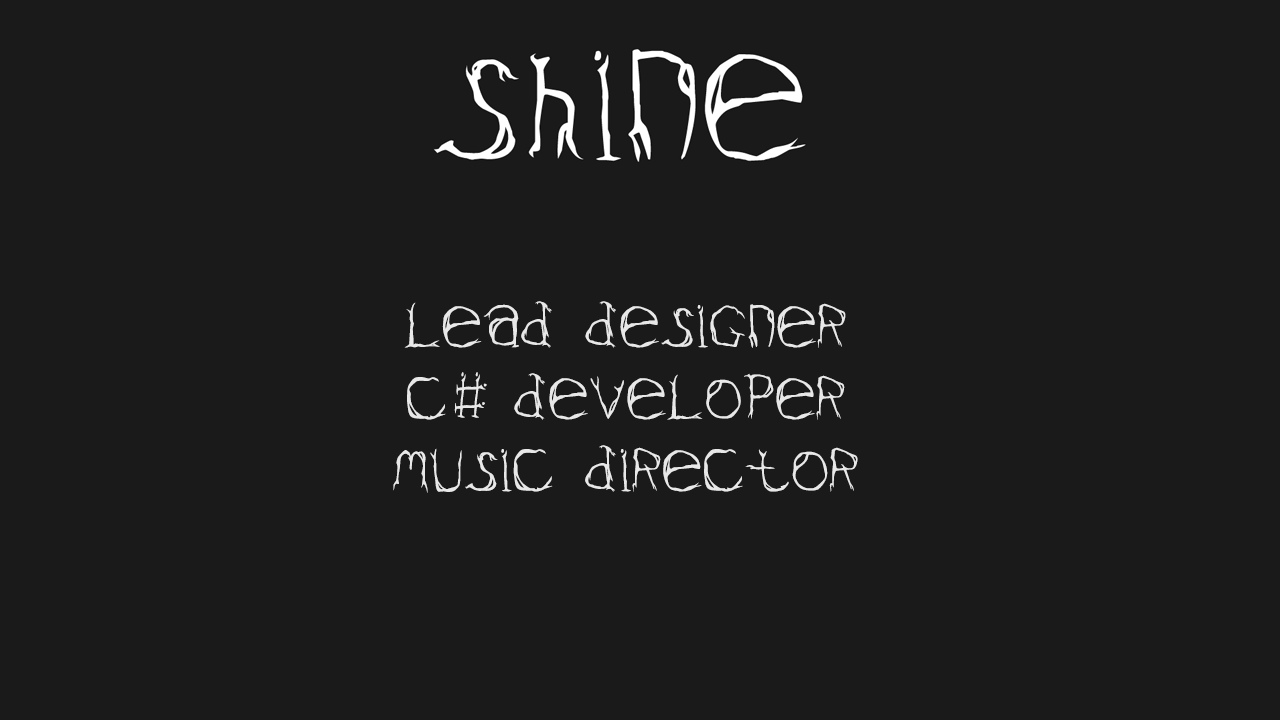
<style>
.page{position:relative;width:1280px;height:720px;background:#1a1a1a}
.page>*{position:absolute;margin:0}
.t1{font:60px "Valium";color:#e8e8e8}
.t2{font:63.3px "Valium";color:#e8e8e8;scale:0.73 1}
.t3{font:42.4px "Valium";color:#e8e8e8;scale:1.56 1}
</style>
<div class="page">
<p class="t1" style="left:393px;top:301px;width:465px;height:192px;text-align:center">Lead Designer  <br>C    Developer<br>music director</p>
<p class="t2" style="left:457px;top:372px;width:9px;height:46px;rotate:12deg">I</p>
<p class="t2" style="left:471px;top:372px;width:9px;height:46px;rotate:12deg">I</p>
<p class="t3" style="left:456px;top:383px;width:31px;height:12px;rotate:90deg">I</p>
<p class="t3" style="left:454px;top:402px;width:31px;height:12px;rotate:90deg">I</p>
</div>
